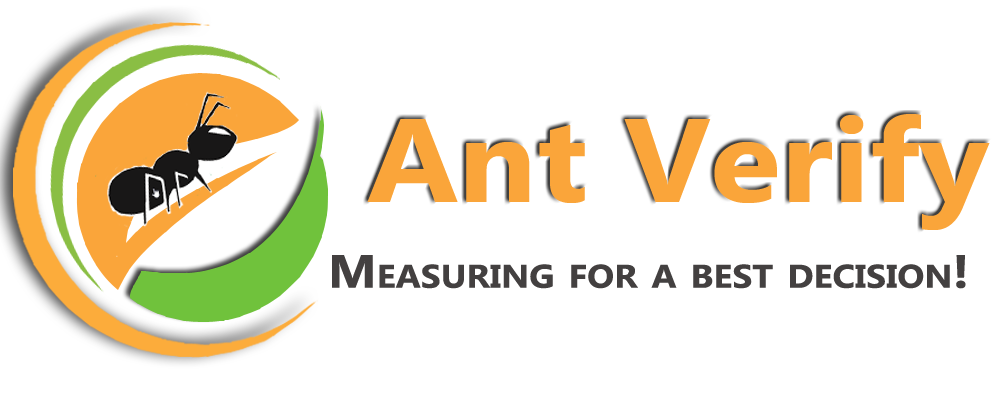
<style>
.page{position:relative;width:1000px;height:400px;background:#ffffff}
.page>*{position:absolute;margin:0}
.t1{font:118.1px "MicrosoftTaiLe-Bold";color:#faa53a;scale:1.1 1}
.t2{font:46.7px "MyanmarText-Bold";color:#434040;font-variant:small-caps;scale:1.09 1}
</style>
<div class="page">
<p class="t1" style="left:367px;top:114px;width:623px;height:116px">Ant Verify</p>
<p class="t2" style="left:332px;top:255px;width:634px;height:34px">Measuring for a best decision!</p>
</div>
